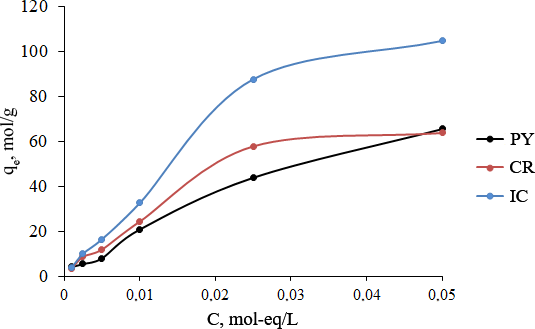
<style>
.page{position:relative;width:535px;height:329px;background:#ffffff}
.page>*{position:absolute;margin:0}
.t1{font:18.7px "TimesNewRomanPSMT";color:#000000}
</style>
<div class="page">
<p class="t1" style="left:0px;top:108px;width:20px;height:67px;rotate:-90deg">qe, mol/g</p>
<p class="t1" style="left:510px;top:133px;width:25px;height:12px">PY</p>
<p class="t1" style="left:510px;top:161px;width:25px;height:12px">CR</p>
<p class="t1" style="left:510px;top:190px;width:18px;height:12px">IC</p>
<p class="t1" style="left:207px;top:312px;width:91px;height:17px">C, mol-eq/L</p>
</div>
